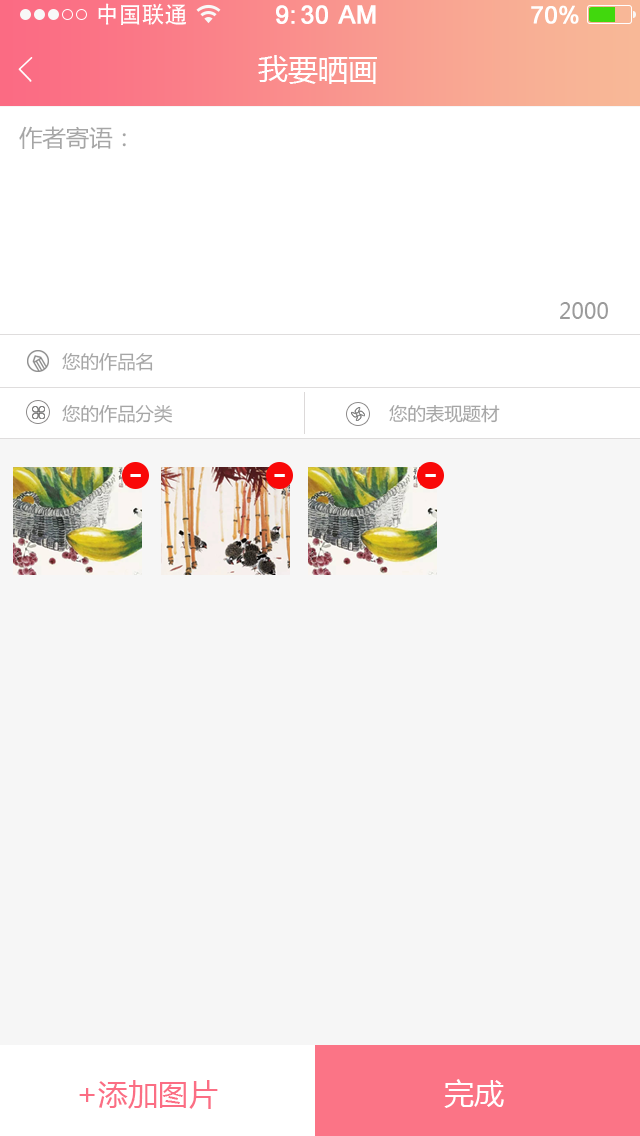
<style>
.page{position:relative;width:640px;height:1136px;background:#f6f6f6}
.page>*{position:absolute;margin:0}
.t1{font:23px "AdobeHeitiStd-Regular";color:#ffffff}
.t2{font:25px "ArialMT";color:#ffffff;font-weight:bold}
.t3{font:24px "ArialMT";color:#ffffff;font-weight:bold}
.t4{font:30px "MicrosoftYaHei";color:#ffffff}
.t5{font:23.4px "MicrosoftYaHei";color:#a6a6a6}
.t6{font:21.6px "MicrosoftYaHei";color:#9b9b9b}
.t7{font:18px "MicrosoftYaHei";color:#a6a6a6}
.t8{font:35.3px "MicrosoftYaHei";color:#ffffff}
.t9{font:30px "MicrosoftYaHei";color:#fb6e84}
</style>
<div class="page">
<p class="t1" style="left:98px;top:3px;width:88px;height:22px">中国联通</p>
<p class="t2" style="left:276px;top:5px;width:100px;height:19px">9:30 AM</p>
<p class="t3" style="left:531px;top:5px;width:48px;height:19px">70%</p>
<p class="t4" style="left:258px;top:55px;width:119px;height:29px">我要晒画</p>
<p class="t5" style="left:19px;top:126px;width:107px;height:23px">作者寄语：</p>
<p class="t6" style="left:560px;top:302px;width:48px;height:17px">2000</p>
<p class="t7" style="left:62px;top:353px;width:91px;height:18px">您的作品名</p>
<p class="t7" style="left:62px;top:405px;width:111px;height:18px">您的作品分类</p>
<p class="t7" style="left:389px;top:405px;width:111px;height:18px">您的表现题材</p>
<p class="t8" style="left:130px;top:474px;width:11px;height:3px">-</p>
<p class="t8" style="left:274px;top:474px;width:11px;height:3px">-</p>
<p class="t8" style="left:425px;top:474px;width:11px;height:3px">-</p>
<p class="t9" style="left:79px;top:1080px;width:139px;height:29px">+添加图片</p>
<p class="t4" style="left:444px;top:1079px;width:60px;height:29px">完成</p>
</div>
